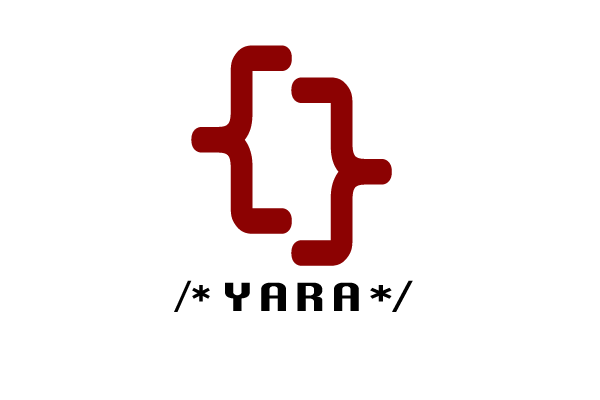
<style>
.page{position:relative;width:600px;height:400px;background:#ffffff}
.page>*{position:absolute;margin:0}
.t1{font:240px "OCRAStd";color:#8c0202;font-weight:bold;scale:0.83 1}
.t2{font:37.5px "Krungthep";letter-spacing:-0.15em;color:#000000;scale:1.11 1}
.t3{font:37.5px "Krungthep";letter-spacing:-0.15em;color:#000000;scale:1.33 1}
.t4{font:37.5px "Krungthep";letter-spacing:0.06em;color:#000000;scale:1.33 1}
</style>
<div class="page">
<p class="t1" style="left:191px;top:45px;width:101px;height:189px">{</p>
<p class="t1" style="left:291px;top:77px;width:101px;height:189px">}</p>
<p class="t2" style="left:174px;top:280px;width:36px;height:32px">/*</p>
<p class="t3" style="left:370px;top:280px;width:43px;height:32px">*/</p>
<p class="t4" style="left:225px;top:282px;width:134px;height:29px">YARA</p>
</div>
